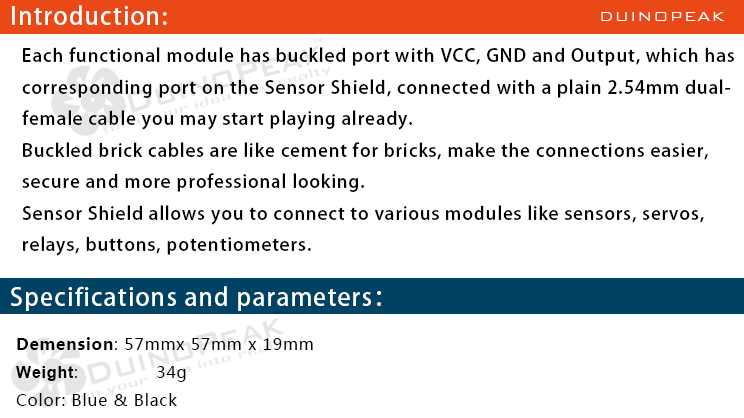
<style>
.page{position:relative;width:744px;height:418px;background:#ffffff}
.page>*{position:absolute;margin:0}
.t1{font:24px "AdobeHeitiStd-Regular";letter-spacing:0.05em;color:#ffffff}
.t2{font:18px "BankGothicBT-Light";letter-spacing:0.05em;color:#ffffff}
.t3{font:18px "AdobeHeitiStd-Regular";letter-spacing:0.05em;color:#000000}
.t4{font:16px "MicrosoftYaHei";letter-spacing:0.05em;color:#000000}
.t5{font:16px "MicrosoftYaHei-Bold";letter-spacing:0.05em;color:#000000}
.t6{font:16px "Arial-BoldMT";letter-spacing:0.05em;color:#000000}
</style>
<div class="page">
<p class="t1" style="left:12px;top:5px;width:155px;height:20px">Introduction:</p>
<p class="t2" style="left:601px;top:12px;width:124px;height:9px">DUINOPEAK</p>
<p class="t3" style="left:22px;top:47px;width:712px;height:209px">Each functional module has buckled port with VCC, GND and Output, which has <br>corresponding port on the Sensor Shield, connected with a plain 2.54mm dual-<br>female cable you may start playing already.<br>Buckled brick cables are like cement for bricks, make the connections easier, <br>secure and more professional looking.<br>Sensor Shield allows you to connect to various modules like sensors, servos, <br>relays, buttons, potentiometers.</p>
<p class="t1" style="left:11px;top:286px;width:370px;height:25px">Specifications and parameters：</p>
<p class="t4" style="left:16px;top:337px;width:297px;height:69px"><span class="t5">Demension</span>: 57mmx 57mm x 19mm<br><span class="t6">Weight</span>:              34g<br>Color: Blue &amp; Black</p>
</div>
